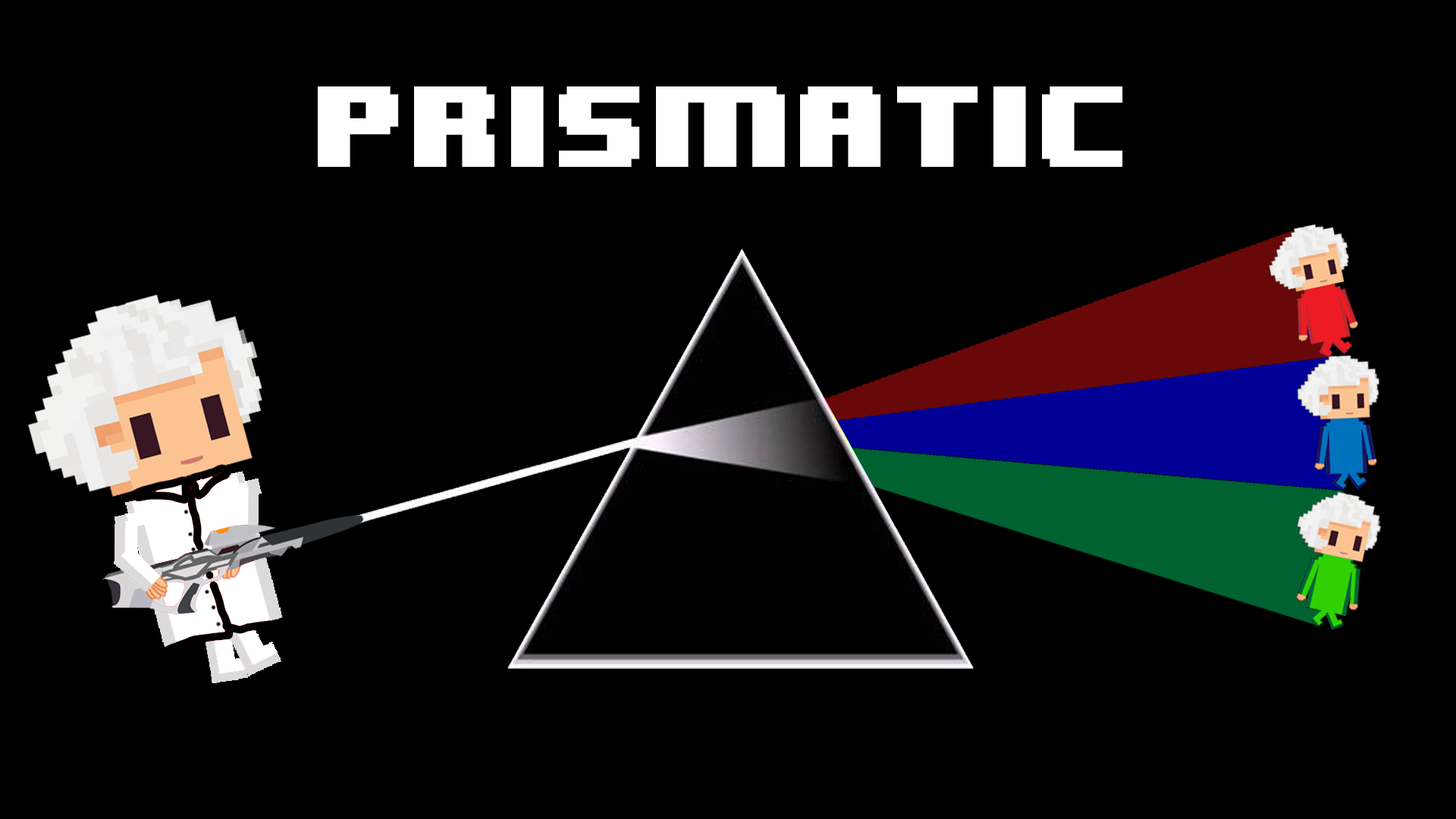
<style>
.page{position:relative;width:1456px;height:819px;background:#000000}
.page>*{position:absolute;margin:0}
.t1{font:96.5px "8BITWONDERNominal";color:#ffffff}
</style>
<div class="page">
<p class="t1" style="left:318px;top:86px;width:805px;height:81px">Prismatic</p>
</div>
